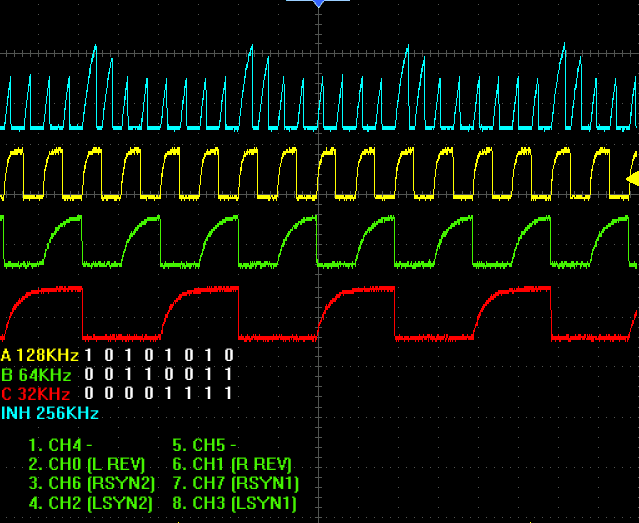
<style>
.page{position:relative;width:639px;height:523px;background:#000000}
.page>*{position:absolute;margin:0}
.t1{font:16px "System";color:#00ffff}
.t2{font:16px "System";color:#ffff00}
.t3{font:16px "System";color:#44f300}
.t4{font:16px "System";color:#ff0000}
.t5{font:16px "System";color:#ffffff}
</style>
<div class="page">
<p class="t1" style="left:0px;top:348px;width:99px;height:71px"><span class="t2">A 128KHz<br></span><span class="t3">B 64KHz<br></span><span class="t4">C 32KHz<br></span>INH 256KHz</p>
<p class="t5" style="left:85px;top:348px;width:148px;height:51px">1  0  1  0  1  0  1  0<br>0  0  1  1  0  0  1  1<br>0  0  0  0  1  1  1  1</p>
<p class="t3" style="left:29px;top:438px;width:126px;height:75px">1. CH4 - <br>2. CH0 (L REV)<br>3. CH6 (RSYN2)<br>4. CH2 (LSYN2)</p>
<p class="t3" style="left:173px;top:438px;width:126px;height:75px">5. CH5 -<br>6. CH1 (R REV)<br>7. CH7 (RSYN1)<br>8. CH3 (LSYN1)</p>
</div>
